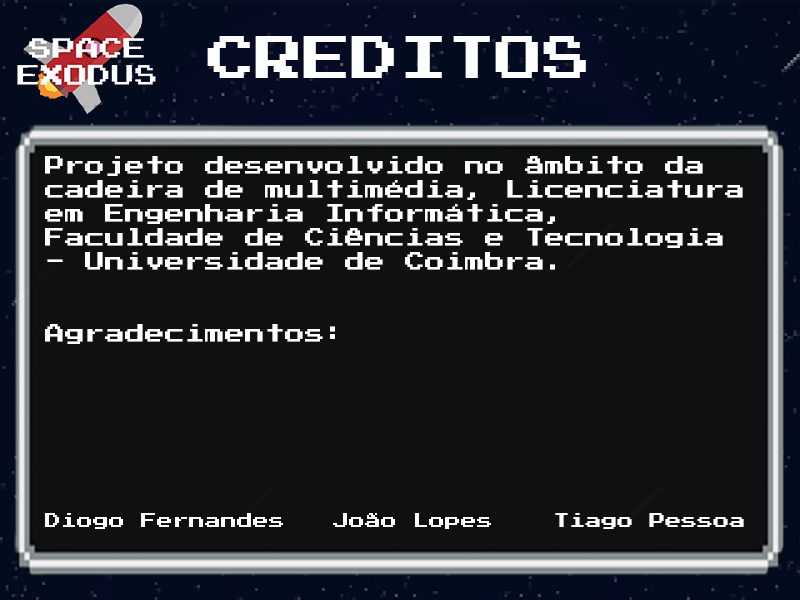
<style>
.page{position:relative;width:800px;height:600px;background:#0f1011}
.page>*{position:absolute;margin:0}
.t1{font:48px "PressStart2P";color:#ffffff}
.t2{font:20px "PressStart2P";color:#ffffff}
.t3{font:16px "PressStart2P";color:#ffffff}
</style>
<div class="page">
<p class="t1" style="left:207px;top:36px;width:379px;height:42px">CREDITOS</p>
<p class="t2" style="left:45px;top:156px;width:698px;height:188px">Projeto desenvolvido no âmbito da cadeira de multimédia, Licenciatura em Engenharia Informática, Faculdade de Ciências e Tecnologia - Universidade de Coimbra.<br><br><br>Agradecimentos:</p>
<p class="t3" style="left:45px;top:513px;width:699px;height:16px">Diogo Fernandes  João Lopes Tiago Pessoa</p>
</div>
